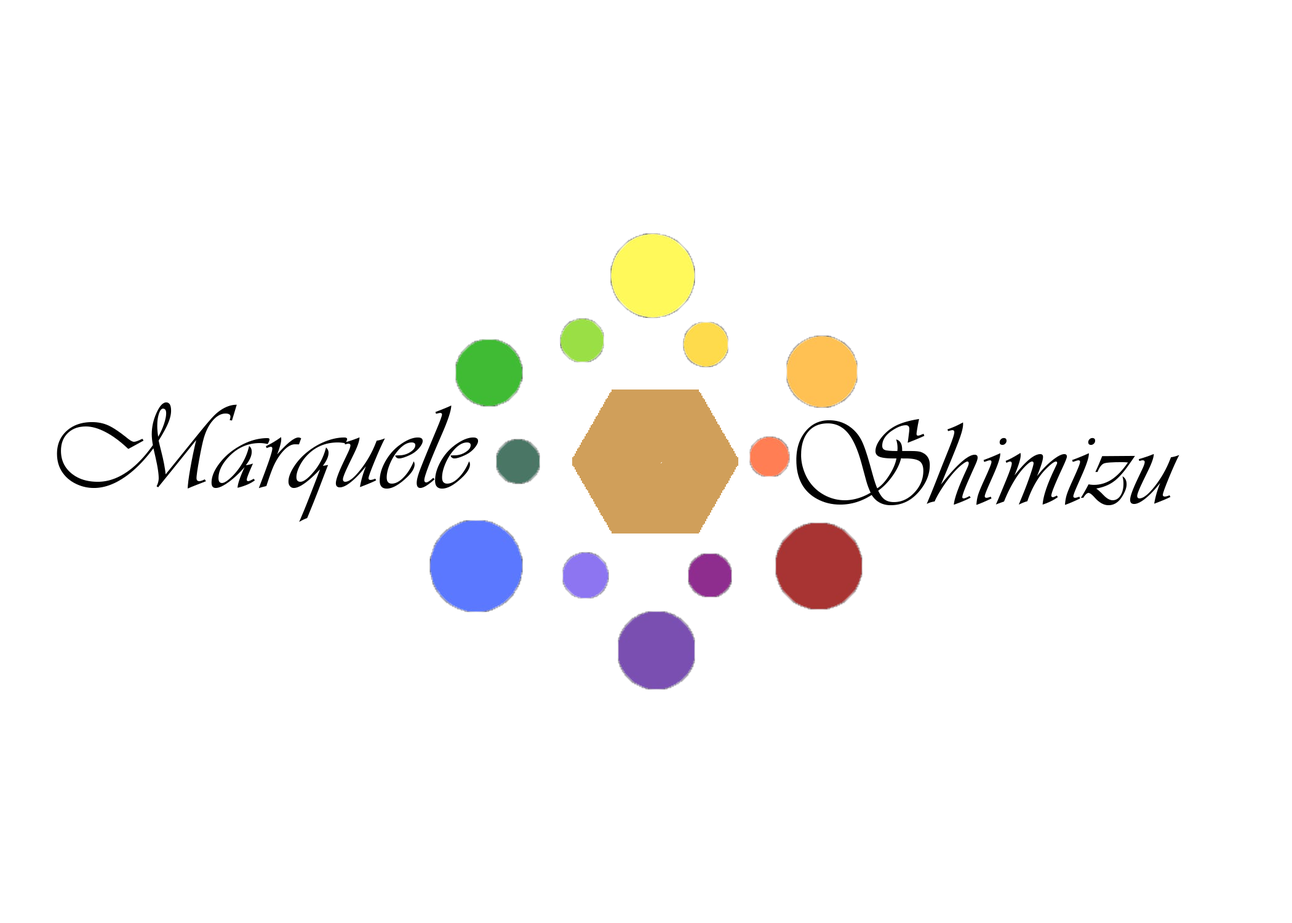
<style>
.page{position:relative;width:1292px;height:923px;background:#ffffff}
.page>*{position:absolute;margin:0}
.t1{font:123.1px "Vivaldii";color:#000000}
</style>
<div class="page">
<p class="t1" style="left:57px;top:402px;width:421px;height:120px">Marquele</p>
<p class="t1" style="left:796px;top:418px;width:383px;height:87px">Shimizu</p>
</div>
